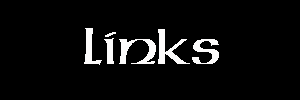
<style>
.page{position:relative;width:300px;height:100px;background:#000000}
.page>*{position:absolute;margin:0}
.t1{font:53.3px "Herald";color:#fcfbfb}
</style>
<div class="page">
<p class="t1" style="left:84px;top:28px;width:135px;height:37px">links</p>
</div>
